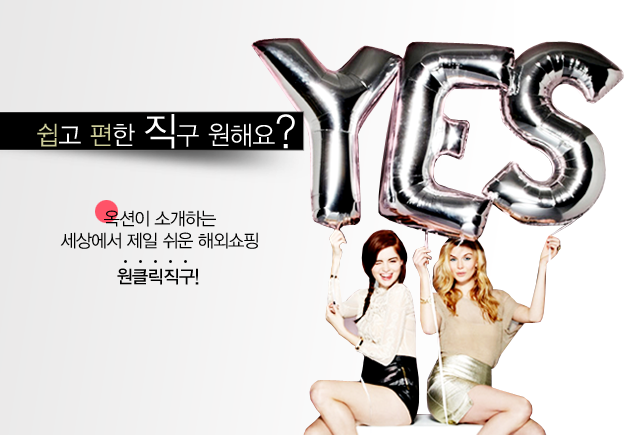
<style>
.page{position:relative;width:630px;height:435px}
.page>*{position:absolute;margin:0}
.t1{font:26px "YDIYGO320";letter-spacing:-0.01em;color:#ffffff;scale:0.95 1}
.t2{font:26px "YDIYGO320";letter-spacing:-0.01em;color:#cccc99;scale:0.95 1}
.t3{font:39.1px "YDIYGO320";letter-spacing:-0.01em;color:#ffffff;scale:0.95 1}
.t4{font:18px "YDIYGO320";letter-spacing:-0.05em;color:#000000;scale:0.97 1}
.t5{font:18px "YDIYGO330";letter-spacing:-0.025em;color:#000000;scale:0.97 1}
</style>
<div class="page">
<p class="t1" style="left:37px;top:114px;width:258px;height:35px"><span class="t2">쉽</span>고 <span class="t2">편</span>한 <span class="t3">직</span>구 원해요<span class="t3">?</span></p>
<p class="t4" style="left:60px;top:210px;width:198px;height:39px;text-align:center">옥션이 소개하는<br>세상에서 제일 쉬운 해외쇼핑</p>
<p class="t5" style="left:117px;top:268px;width:82px;height:17px">원클릭직구!</p>
</div>
